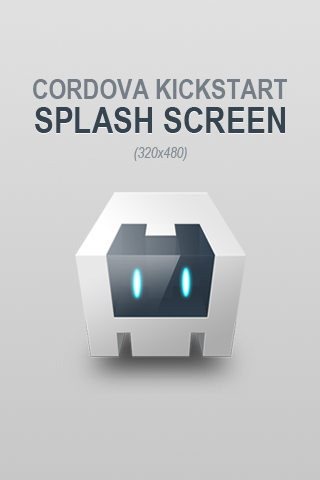
<style>
.page{position:relative;width:320px;height:480px}
.page>*{position:absolute;margin:0}
.t1{font:27.9px "ArialNarrow-Bold";color:#757e86;text-transform:uppercase}
.t2{font:36.4px "ArialNarrow-Bold";color:#364450;text-transform:uppercase}
.t3{font:14.5px "ArialNarrow-Italic";color:#868e96}
</style>
<div class="page">
<p class="t1" style="left:33px;top:79px;width:254px;height:20px">Cordova Kickstart</p>
<p class="t2" style="left:35px;top:107px;width:250px;height:26px">Splash Screen</p>
<p class="t3" style="left:134px;top:147px;width:53px;height:14px">(320x480)</p>
</div>
